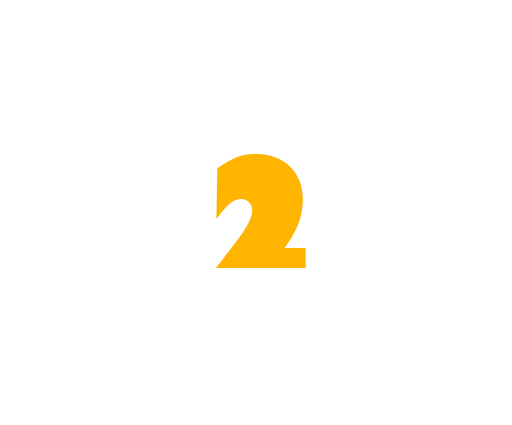
<style>
.page{position:relative;width:512px;height:425px;background:#ffffff}
.page>*{position:absolute;margin:0}
.t1{font:150px "GillSansNova-UltraBold";letter-spacing:-0.05em;color:#ffb400}
</style>
<div class="page">
<p class="t1" style="left:215px;top:154px;width:91px;height:114px">2</p>
</div>
